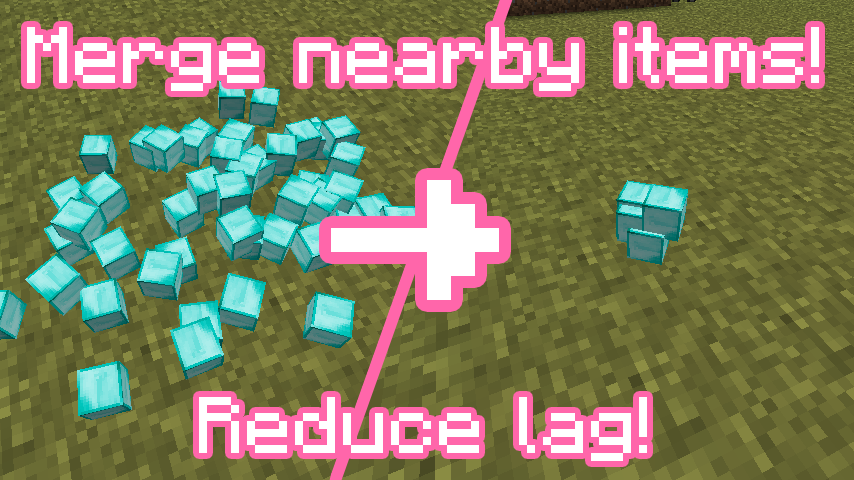
<style>
.page{position:relative;width:854px;height:480px}
.page>*{position:absolute;margin:0}
.t1{font:96px "MinecraftDefaultRegular";color:#ffffff}
.t2{font:288px "MinecraftDefaultRegular";color:#ffffff}
</style>
<div class="page">
<p class="t1" style="left:27px;top:27px;width:792px;height:64px">Merge nearby items!</p>
<p class="t2" style="left:331px;top:180px;width:168px;height:120px">→</p>
<p class="t1" style="left:199px;top:397px;width:448px;height:64px">Reduce lag!</p>
</div>
